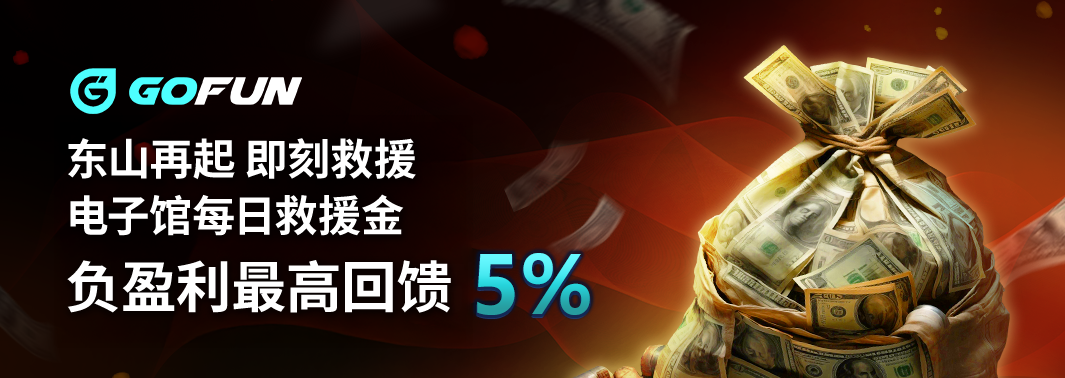
<style>
.page{position:relative;width:1065px;height:378px}
.page>*{position:absolute;margin:0}
.t1{font:43.1px "NotoSansCJKtc-Bold";letter-spacing:-0.01em;color:#ffffff}
.t2{font:55.9px "NotoSansCJKtc-Bold";letter-spacing:-0.01em;color:#ffffff}
</style>
<div class="page">
<p class="t1" style="left:68px;top:138px;width:348px;height:42px">东山再起 即刻救援</p>
<p class="t1" style="left:70px;top:194px;width:334px;height:42px">电子馆每日救援金</p>
<p class="t2" style="left:67px;top:260px;width:384px;height:53px">负盈利最高回馈</p>
</div>
